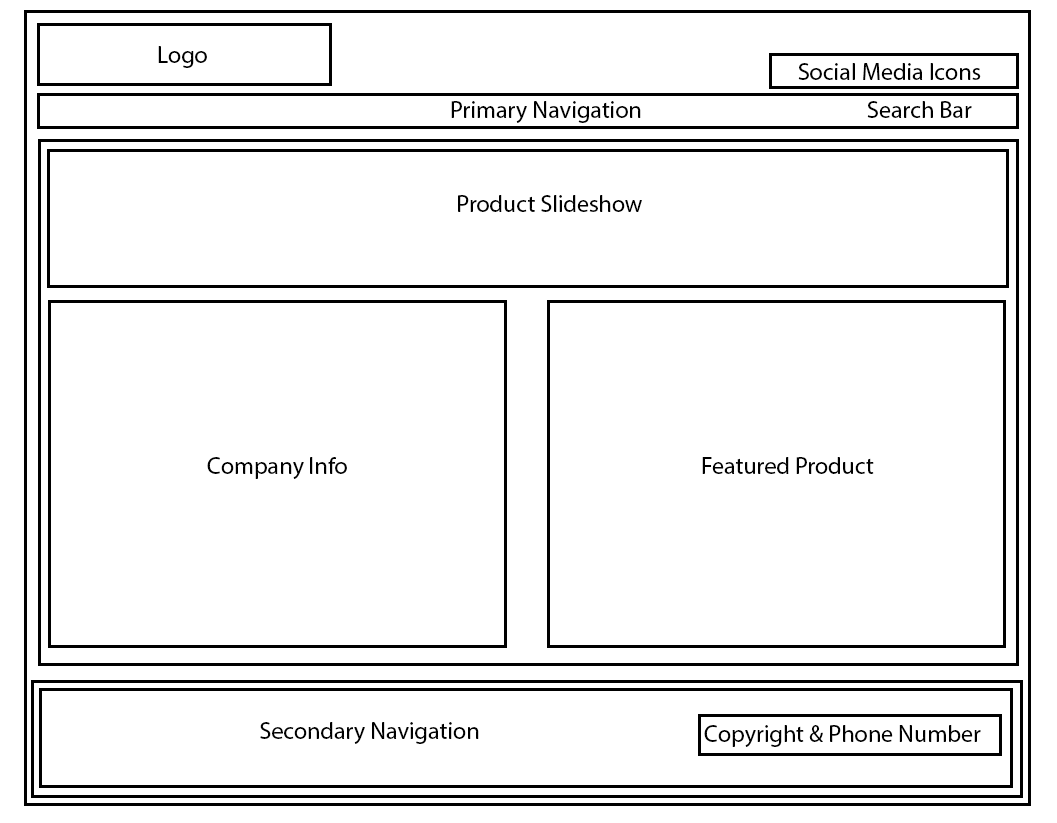
<style>
.page{position:relative;width:1057px;height:823px;background:#ffffff}
.page>*{position:absolute;margin:0}
.t1{font:24px "MyriadPro-Regular";color:#000000}
</style>
<div class="page">
<p class="t1" style="left:158px;top:46px;width:49px;height:22px">Logo</p>
<p class="t1" style="left:798px;top:63px;width:183px;height:17px">Social Media Icons</p>
<p class="t1" style="left:451px;top:101px;width:190px;height:22px">Primary Navigation</p>
<p class="t1" style="left:867px;top:101px;width:105px;height:17px">Search Bar</p>
<p class="t1" style="left:458px;top:195px;width:184px;height:17px">Product Slideshow</p>
<p class="t1" style="left:207px;top:457px;width:140px;height:22px">Company Info</p>
<p class="t1" style="left:702px;top:457px;width:172px;height:17px">Featured Product</p>
<p class="t1" style="left:260px;top:722px;width:219px;height:22px">Secondary Navigation</p>
<p class="t1" style="left:704px;top:725px;width:277px;height:22px">Copyright &amp; Phone Number</p>
</div>
